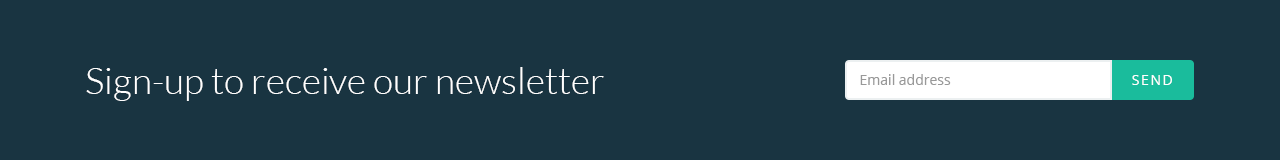
<style>
.page{position:relative;width:1280px;height:160px;background:#193441}
.page>*{position:absolute;margin:0}
.t1{font:37px "Lato-Light";color:#ffffff}
.t2{font:14px "OpenSans";color:#999999}
.t3{font:14px "OpenSans";letter-spacing:0.11em;color:#ffffff}
</style>
<div class="page">
<p class="t1" style="left:86px;top:67px;width:518px;height:34px">Sign-up to receive our newsletter</p>
<p class="t2" style="left:860px;top:74px;width:91px;height:11px">Email address</p>
<p class="t3" style="left:1132px;top:75px;width:40px;height:10px">SEND</p>
</div>
